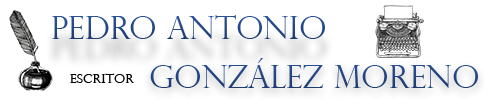
<style>
.page{position:relative;width:500px;height:100px;background:#ffffff}
.page>*{position:absolute;margin:0}
.t1{font:32px "PerpetuaTitlingMT-Light";color:#244785}
.t2{font:32px "PerpetuaTitlingMT-Light";color:#234480}
.t3{font:13.3px "PerpetuaTitlingMT-Light";color:#000000}
</style>
<div class="page">
<p class="t1" style="left:52px;top:15px;width:273px;height:24px">Pedro Antonio</p>
<p class="t2" style="left:150px;top:58px;width:328px;height:30px">González Moreno</p>
<p class="t3" style="left:70px;top:73px;width:64px;height:10px">Escritor</p>
</div>
